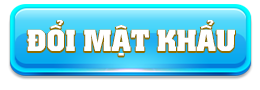
<style>
.page{position:relative;width:260px;height:90px;background:#ffffff}
.page>*{position:absolute;margin:0}
.t1{font:30px "UTM-Colossalis";color:#ffffff}
</style>
<div class="page">
<p class="t1" style="left:27px;top:20px;width:208px;height:36px">ĐỔI MẬT KHẨU</p>
</div>
